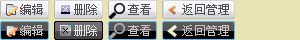
<style>
.page{position:relative;width:300px;height:40px;background:#eae4b4}
.page>*{position:absolute;margin:0}
.t1{font:12px "SimSun";color:#4f4f4f}
.t2{font:12px "SimSun";color:#cbc4c4}
.t3{font:12px "SimSun";color:#e4e4e4}
</style>
<div class="page">
<p class="t1" style="left:20px;top:4px;width:23px;height:11px">编辑</p>
<p class="t1" style="left:74px;top:4px;width:23px;height:11px">删除</p>
<p class="t1" style="left:128px;top:4px;width:23px;height:11px">查看</p>
<p class="t1" style="left:182px;top:4px;width:47px;height:11px">返回管理</p>
<p class="t2" style="left:20px;top:25px;width:23px;height:11px">编辑</p>
<p class="t3" style="left:74px;top:25px;width:23px;height:11px">删除</p>
<p class="t2" style="left:128px;top:25px;width:23px;height:11px">查看</p>
<p class="t2" style="left:182px;top:25px;width:47px;height:11px">返回管理</p>
</div>
